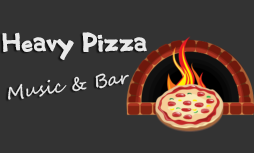
<style>
.page{position:relative;width:254px;height:153px;background:#333333}
.page>*{position:absolute;margin:0}
.t1{font:24px "BlackMetalSans";color:#e9e9e9}
.t2{font:18px "SegoeScript";color:#e9e9e9}
</style>
<div class="page">
<p class="t1" style="left:2px;top:32px;width:145px;height:28px">Heavy Pizza</p>
<p class="t2" style="left:8px;top:73px;width:121px;height:27px;rotate:-8deg">Music &amp; Bar</p>
</div>
